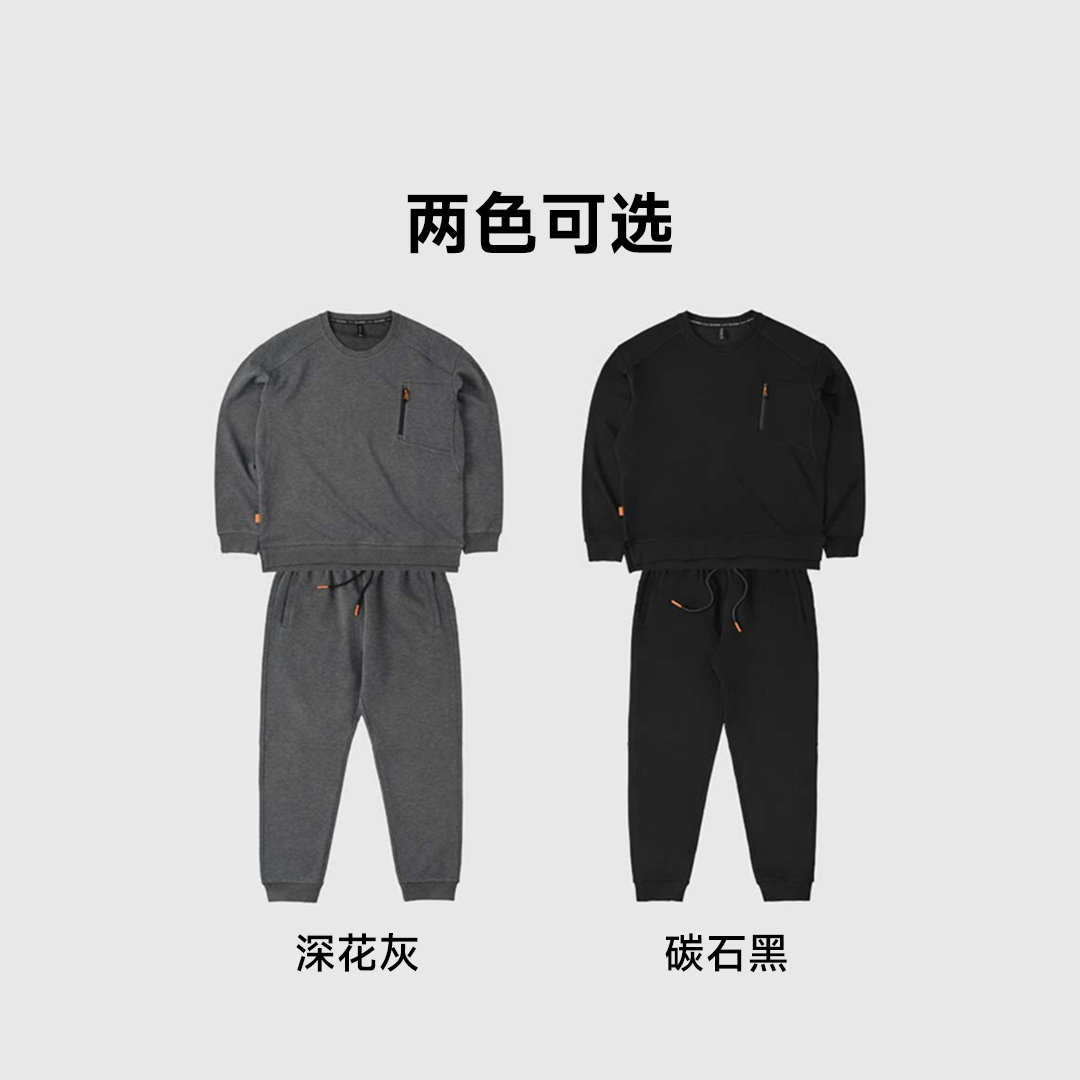
<style>
.page{position:relative;width:1080px;height:1080px;background:#e8e8e8}
.page>*{position:absolute;margin:0}
.t1{font:68px "MiSans-Semibold";color:#000000}
.t2{font:42px "MiSans-Medium";color:#000000}
</style>
<div class="page">
<p class="t1" style="left:407px;top:190px;width:266px;height:64px">两色可选</p>
<p class="t2" style="left:296px;top:933px;width:122px;height:39px">深花灰</p>
<p class="t2" style="left:665px;top:933px;width:122px;height:40px">碳石黑</p>
</div>
